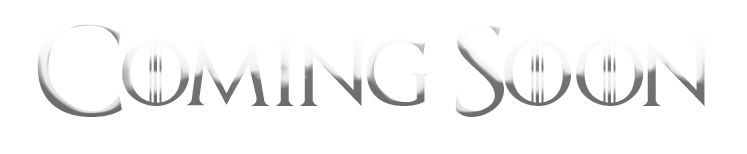
<style>
.page{position:relative;width:747px;height:154px;background:#ffffff}
.page>*{position:absolute;margin:0}
.t1{font:95.9px "GameofThrones";font-variant:small-caps}
.t2{font:95.9px "GameofThrones"}
</style>
<div class="page">
<p class="t1" style="left:37px;top:21px;width:673px;height:96px"><span class="t2">C</span>oming<span class="t2"> S</span>oon</p>
</div>
